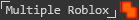
<style>
.page{position:relative;width:139px;height:20px;background:#333333}
.page>*{position:absolute;margin:0}
.t1{font:12.5px "Consolas";color:#d3d3d3}
</style>
<div class="page">
<p class="t1" style="left:5px;top:5px;width:104px;height:12px">Multiple Roblox</p>
</div>
